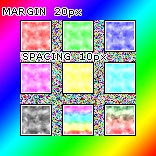
<style>
.page{position:relative;width:156px;height:156px}
.page>*{position:absolute;margin:0}
.t1{font:10px "Verdana";color:#000000}
</style>
<div class="page">
<p class="t1" style="left:3px;top:8px;width:78px;height:9px">MARGIN  20px</p>
<p class="t1" style="left:23px;top:53px;width:83px;height:9px">SPACING  10px</p>
</div>
